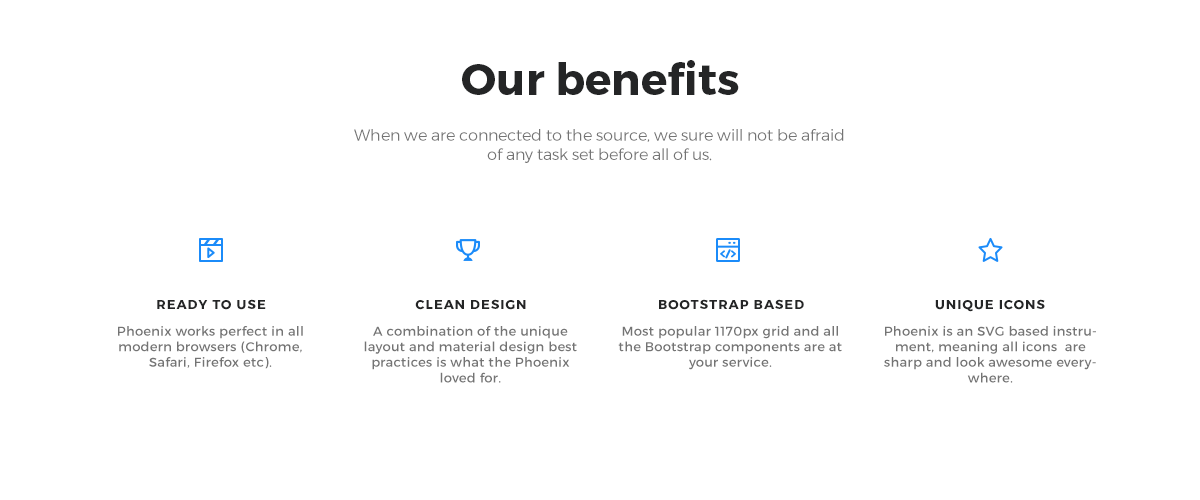
<style>
.page{position:relative;width:1200px;height:500px;background:#ffffff}
.page>*{position:absolute;margin:0}
.t1{font:44px "Montserrat-Bold";color:#242526}
.t2{font:16px "Montserrat-Light";color:#747474}
.t3{font:13px "Montserrat-Bold";letter-spacing:0.08em;color:#242526;text-transform:uppercase}
.t4{font:13px "Montserrat-Regular";letter-spacing:0.025em;color:#747474}
</style>
<div class="page">
<p class="t1" style="left:462px;top:60px;width:277px;height:35px">Our benefits</p>
<p class="t2" style="left:354px;top:129px;width:490px;height:34px;text-align:center">When we are connected to the source, we sure will not be afraid of any task set before all of us.</p>
<p class="t3" style="left:157px;top:299px;width:109px;height:11px">ready to use</p>
<p class="t3" style="left:415px;top:299px;width:111px;height:11px">Clean design</p>
<p class="t3" style="left:659px;top:299px;width:145px;height:11px">bootstrap based</p>
<p class="t3" style="left:935px;top:299px;width:110px;height:13px">unique icons</p>
<p class="t4" style="left:118px;top:326px;width:185px;height:43px;text-align:center">Phoenix works perfect in all modern browsers (Chrome, Safari, Firefox etc).</p>
<p class="t4" style="left:364px;top:326px;width:213px;height:57px;text-align:center">A combination of the unique layout and material design best practices is what the Phoenix loved for.</p>
<p class="t4" style="left:618px;top:326px;width:224px;height:44px;text-align:center">Most popular 1170px grid and all the Bootstrap components are at your service.</p>
<p class="t4" style="left:884px;top:326px;width:212px;height:57px;text-align:center">Phoenix is an SVG based instrument, meaning all icons  are sharp and look awesome everywhere.</p>
</div>
